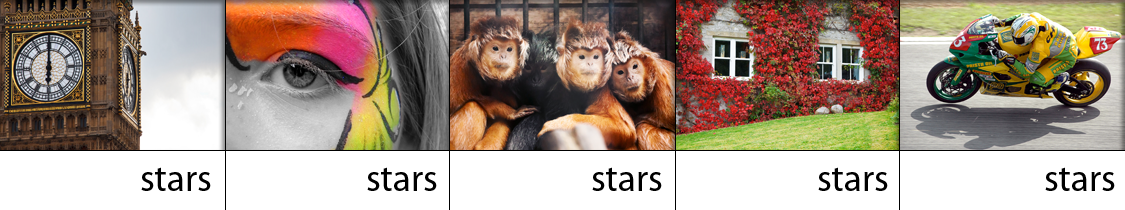
<style>
.page{position:relative;width:1125px;height:210px;background:#ffffff}
.page>*{position:absolute;margin:0}
.t1{font:37.5px "MyriadPro-Regular";color:#000000}
</style>
<div class="page">
<p class="t1" style="left:141px;top:167px;width:70px;height:24px">stars</p>
<p class="t1" style="left:367px;top:167px;width:70px;height:24px">stars</p>
<p class="t1" style="left:592px;top:167px;width:70px;height:24px">stars</p>
<p class="t1" style="left:818px;top:167px;width:70px;height:24px">stars</p>
<p class="t1" style="left:1045px;top:167px;width:70px;height:24px">stars</p>
</div>
